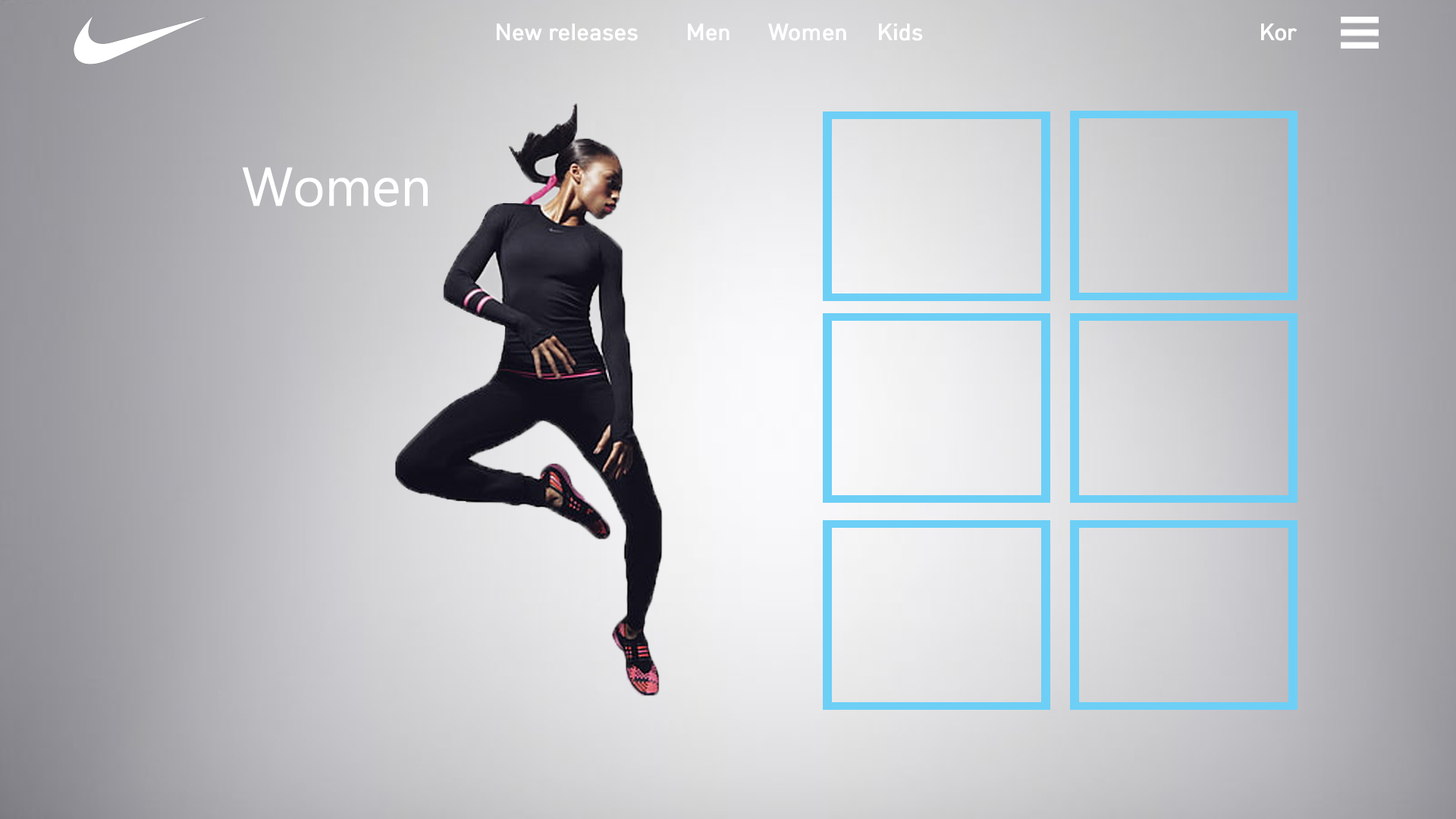
<style>
.page{position:relative;width:1456px;height:819px}
.page>*{position:absolute;margin:0}
.t1{font:22.7px "HCRDotum-Bold";color:#ffffff}
.t2{font:54.6px "Gadugi";color:#ffffff}
</style>
<div class="page">
<p class="t1" style="left:497px;top:24px;width:800px;height:17px">New releases  Men  Women  Kids             Kor</p>
<p class="t2" style="left:242px;top:167px;width:186px;height:40px">Women</p>
</div>
